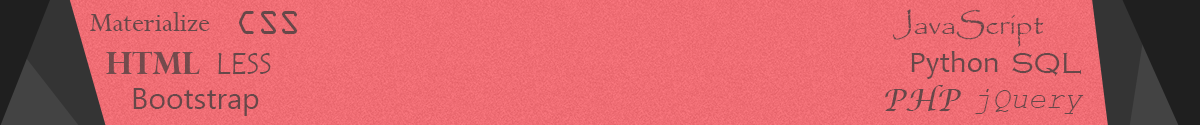
<style>
.page{position:relative;width:1200px;height:125px}
.page>*{position:absolute;margin:0}
.t1{font:30px "Perpetua";color:#674749}
.t2{font:30px "OCRAStd";color:#674749}
.t3{font:30px "Papyrus-Regular";color:#674749}
.t4{font:30px "PerpetuaTitlingMT-Bold";color:#734b4d}
.t5{font:30px "TempusSansITC";color:#674749}
.t6{font:30px "Candara";color:#674749}
.t7{font:30px "CopperplateGothic-Light";color:#674749}
.t8{font:30px "MicrosoftNewTaiLue";color:#674749}
.t9{font:30px "LucidaCalligraphy-Italic";color:#674749}
.t10{font:30px "CourierNewPS-ItalicMT";color:#674749}
</style>
<div class="page">
<p class="t1" style="left:90px;top:12px;width:120px;height:19px">Materialize</p>
<p class="t2" style="left:239px;top:11px;width:58px;height:23px">CSS</p>
<p class="t3" style="left:892px;top:9px;width:152px;height:38px">JavaScript</p>
<p class="t4" style="left:106px;top:51px;width:94px;height:23px">HTML</p>
<p class="t5" style="left:218px;top:53px;width:53px;height:21px">LESS</p>
<p class="t6" style="left:911px;top:51px;width:87px;height:28px">Python</p>
<p class="t7" style="left:1012px;top:53px;width:70px;height:23px">SQL</p>
<p class="t8" style="left:133px;top:88px;width:126px;height:28px">Bootstrap</p>
<p class="t9" style="left:885px;top:85px;width:76px;height:26px">PHP</p>
<p class="t10" style="left:975px;top:89px;width:109px;height:25px">jQuery</p>
</div>
